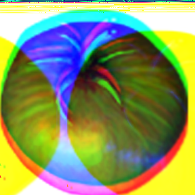
<style>
.page{position:relative;width:195px;height:195px}
.page>*{position:absolute;margin:0}
.t1{font:361.1px "Minion-Regular"}
</style>
<div class="page">
<p class="t1" style="left:0px;top:161px;width:2px;height:3px">T  mat</p>
</div>
